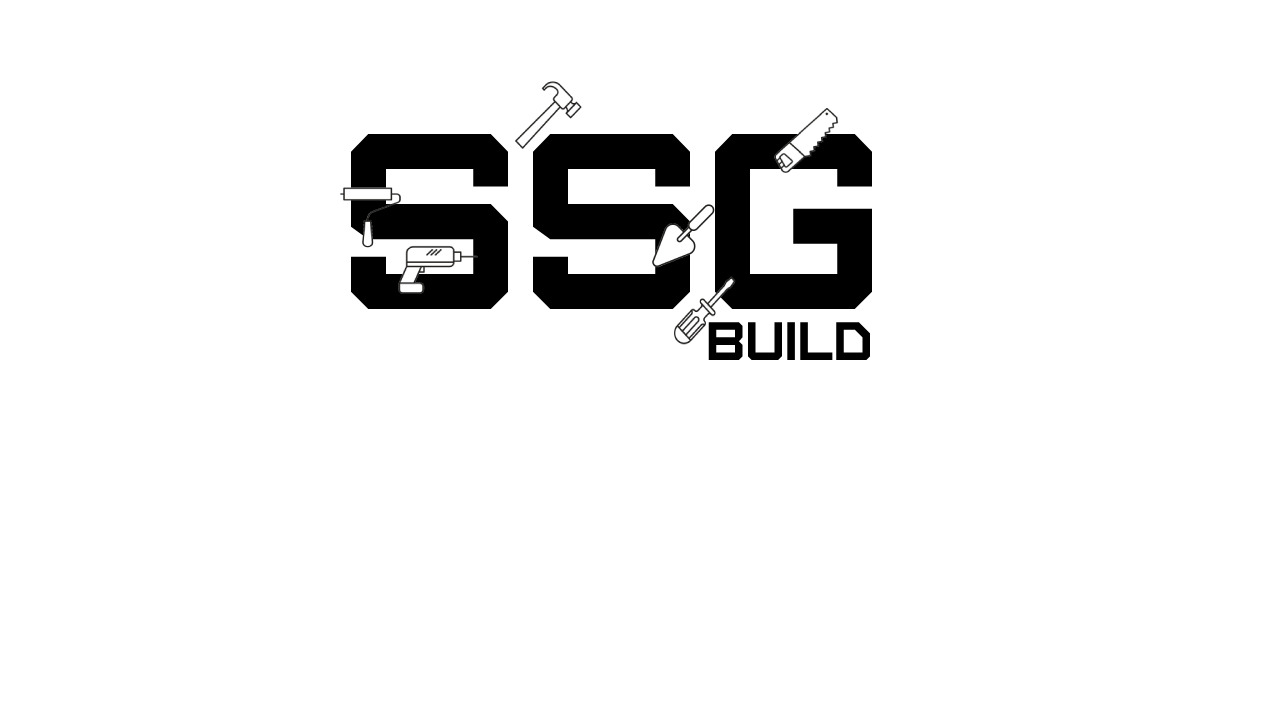
<style>
.page{position:relative;width:1280px;height:720px;background:#ffffff}
.page>*{position:absolute;margin:0}
.t1{font:250px "Furore";color:#000000}
.t2{font:54px "Furore";color:#000000}
</style>
<div class="page">
<p class="t1" style="left:350px;top:134px;width:522px;height:175px">SSG</p>
<p class="t2" style="left:708px;top:322px;width:163px;height:38px">Build</p>
</div>
